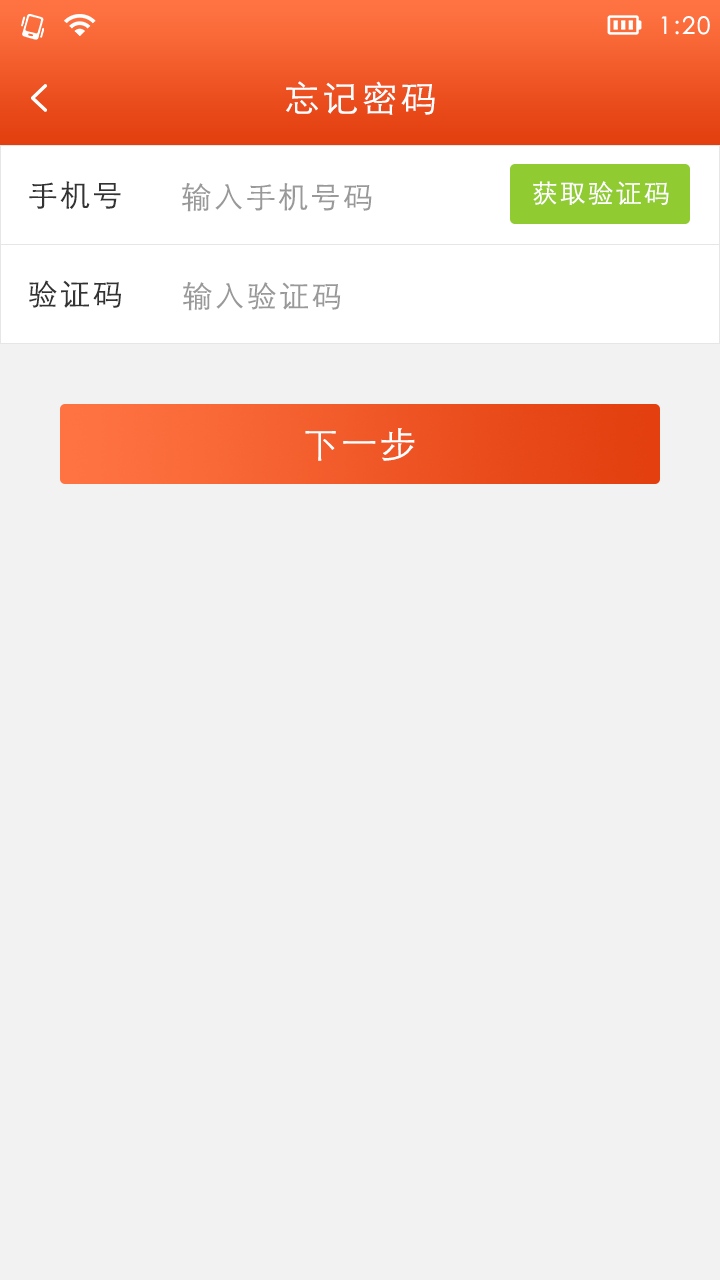
<style>
.page{position:relative;width:720px;height:1280px;background:#f2f2f2}
.page>*{position:absolute;margin:0}
.t1{font:24px "STXihei";letter-spacing:0.075em;color:#ffffff}
.t2{font:36px "STHeitiSC-Light";letter-spacing:0.075em;color:#ffffff}
.t3{font:30px "STHeitiSC-Light";letter-spacing:0.075em;color:#333333}
.t4{font:30px "STHeitiSC-Light";letter-spacing:0.075em;color:#999999}
.t5{font:26px "STHeitiSC-Light";letter-spacing:0.075em;color:#ffffff}
.t6{font:30px "STHeitiSC-Light";letter-spacing:0.075em;color:#999999;text-transform:uppercase}
</style>
<div class="page">
<p class="t1" style="left:661px;top:16px;width:49px;height:19px">1:20</p>
<p class="t2" style="left:286px;top:81px;width:149px;height:34px">忘记密码</p>
<p class="t3" style="left:29px;top:181px;width:92px;height:28px">手机号</p>
<p class="t4" style="left:182px;top:183px;width:190px;height:29px">输入手机号码</p>
<p class="t5" style="left:533px;top:181px;width:136px;height:24px">获取验证码</p>
<p class="t3" style="left:29px;top:280px;width:92px;height:28px">验证码</p>
<p class="t6" style="left:183px;top:282px;width:158px;height:29px">输入验证码</p>
<p class="t2" style="left:305px;top:428px;width:110px;height:33px">下一步</p>
</div>
